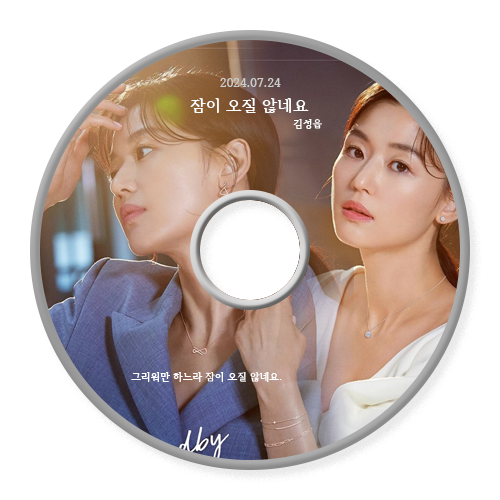
<style>
.page{position:relative;width:500px;height:500px;background:#ffffff}
.page>*{position:absolute;margin:0}
.t1{font:12px "HCRBatang-Bold";color:#cccccc}
.t2{font:16px "HCRBatang-Bold";color:#ffffff}
.t3{font:10px "HCRBatang-Bold";color:#ffffff}
</style>
<div class="page">
<p class="t1" style="left:220px;top:78px;width:61px;height:9px">2024.07.24</p>
<p class="t2" style="left:190px;top:98px;width:119px;height:15px">잠이 오질 않네요</p>
<p class="t3" style="left:293px;top:119px;width:29px;height:10px">김성읍</p>
<p class="t3" style="left:131px;top:372px;width:151px;height:10px">그리워만 하느라 잠이 오질 않네요.</p>
</div>
